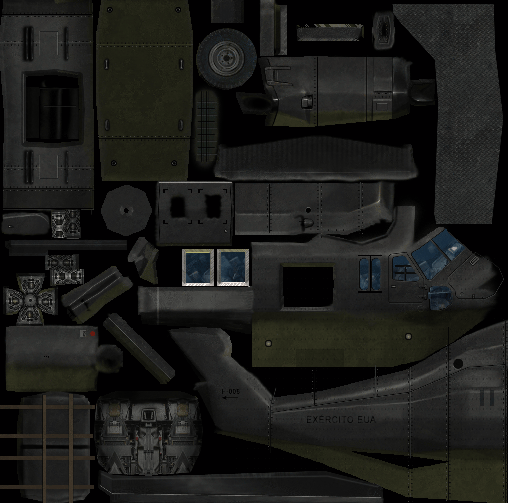
<style>
.page{position:relative;width:508px;height:503px}
.page>*{position:absolute;margin:0}
.t1{font:9.3px "ArialMT";letter-spacing:0.075em;color:#000000;text-transform:uppercase;scale:0.9 1}
</style>
<div class="page">
<p class="t1" style="left:307px;top:414px;width:69px;height:9px">Exército EUA</p>
</div>
